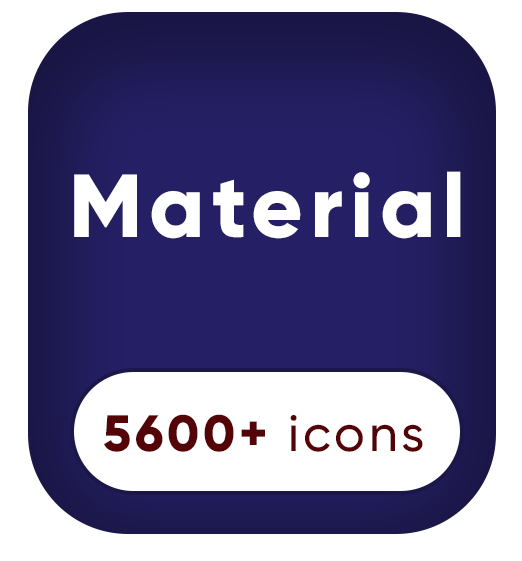
<style>
.page{position:relative;width:522px;height:561px;background:#ffffff}
.page>*{position:absolute;margin:0}
.t1{font:89.5px "Gilroy-ExtraBold";letter-spacing:0.075em;color:#ffffff}
.t2{font:50.9px "Gilroy-ExtraBold";letter-spacing:0.075em;color:#540306}
.t3{font:50.9px "Gilroy-Medium";letter-spacing:0.075em;color:#540306}
</style>
<div class="page">
<p class="t1" style="left:74px;top:171px;width:387px;height:68px">Material</p>
<p class="t2" style="left:104px;top:414px;width:319px;height:38px">5600+ <span class="t3">icons</span></p>
</div>
